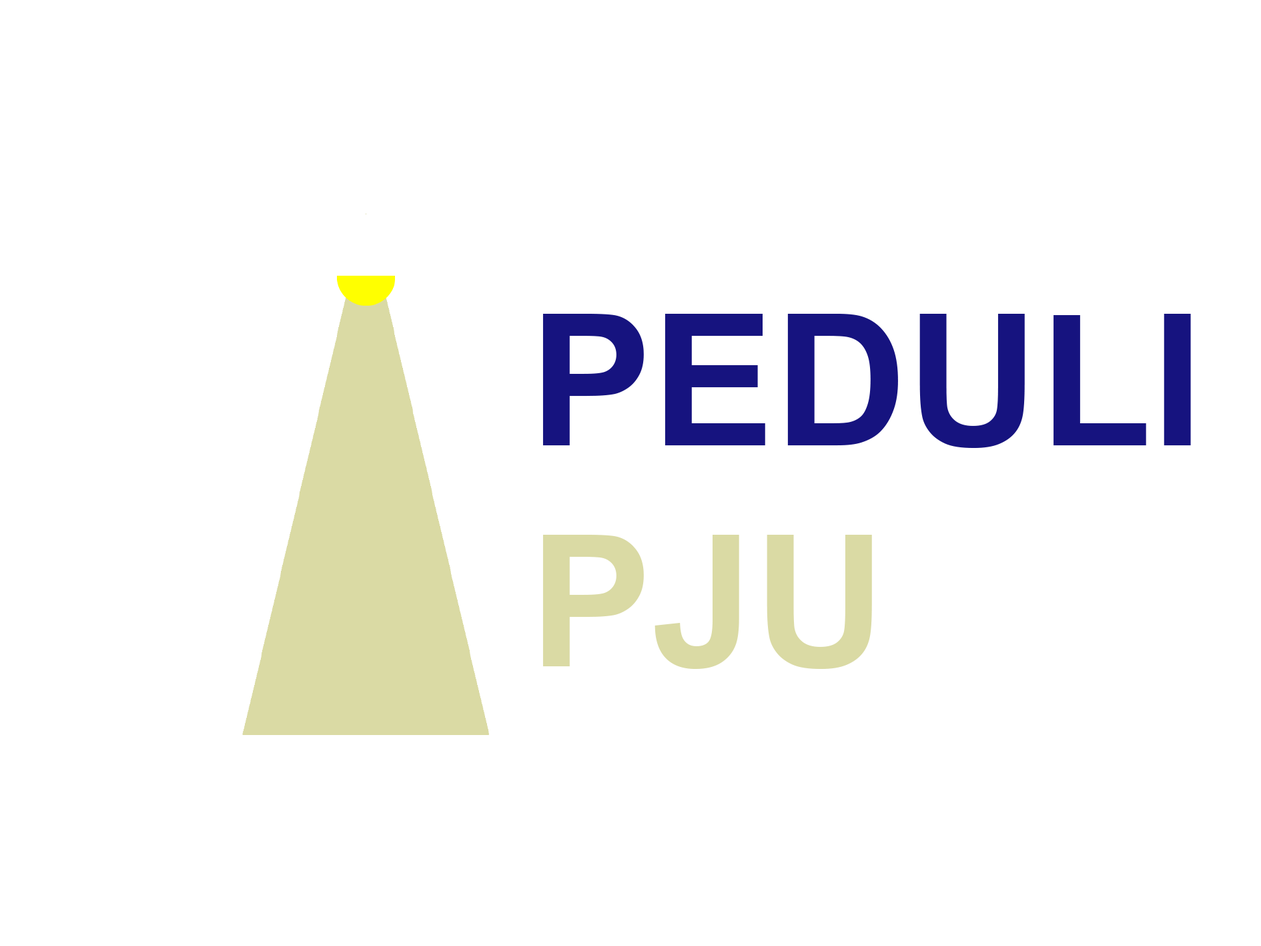
<style>
.page{position:relative;width:1261px;height:946px;background:#ffffff}
.page>*{position:absolute;margin:0}
.t1{font:183.6px "Arial-BoldMT";color:#16137f}
.t2{font:183.6px "Arial-BoldMT";color:#dadaa4}
</style>
<div class="page">
<p class="t1" style="left:542px;top:314px;width:649px;height:355px">PEDULI<br><span class="t2">PJU</span></p>
</div>
